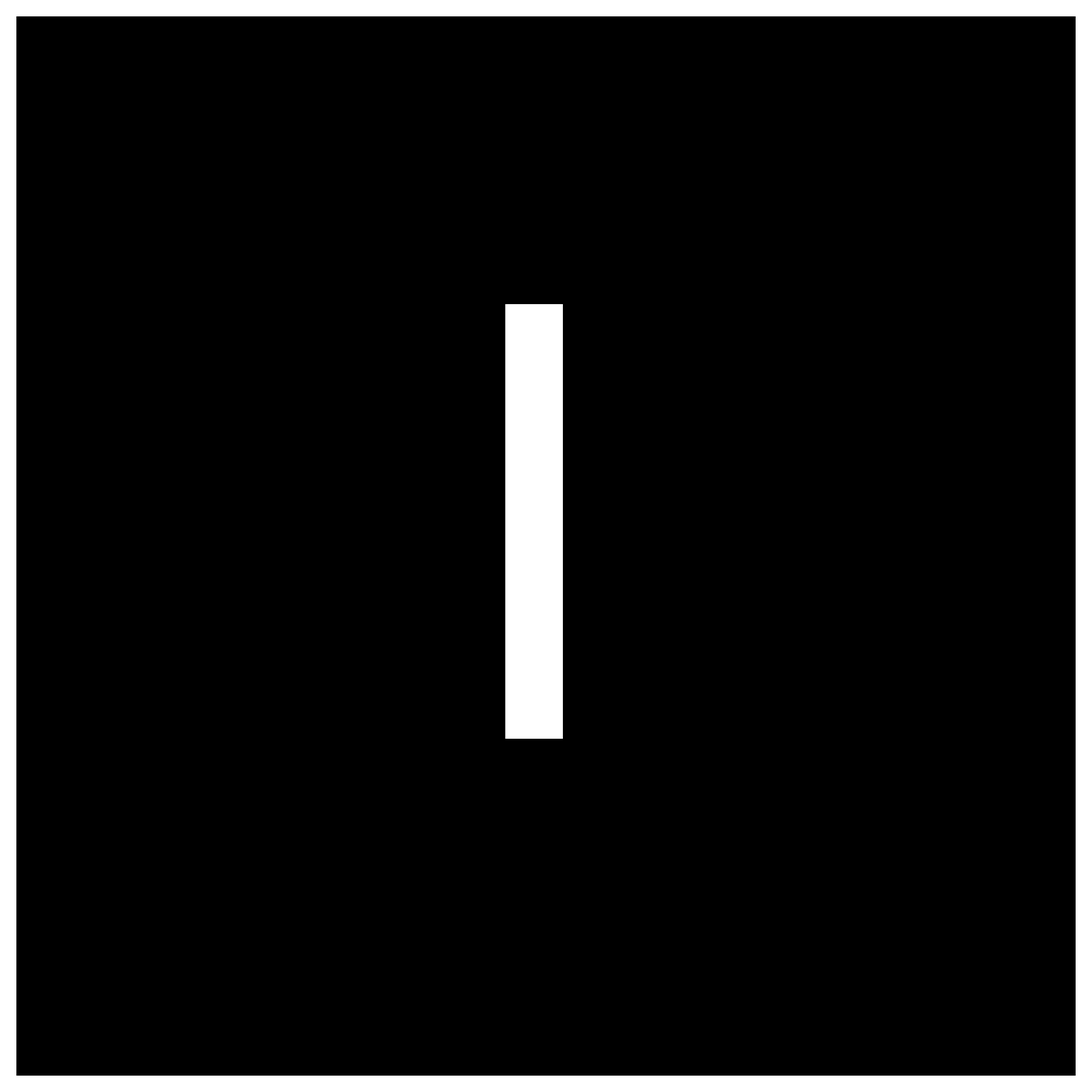
<style>
.page{position:relative;width:1092px;height:1092px;background:#000000}
.page>*{position:absolute;margin:0}
.t1{font:606.7px "ArialMT";color:#ffffff}
</style>
<div class="page">
<p class="t1" style="left:505px;top:304px;width:58px;height:435px">I</p>
</div>
